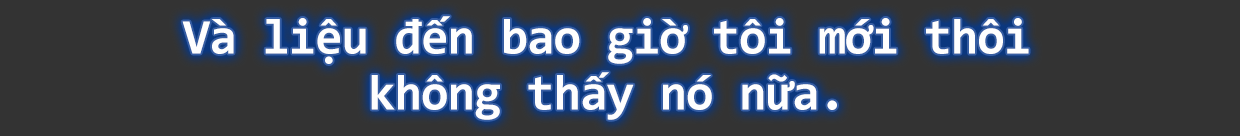
<style>
.page{position:relative;width:1240px;height:136px;background:#333333}
.page>*{position:absolute;margin:0}
.t1{font:50px/48px "Consolas-Bold";letter-spacing:-0.02em;color:#fefefe}
</style>
<div class="page">
<p class="t1" style="left:182px;top:16px;width:847px;height:104px;text-align:center">Và liệu đến bao giờ tôi mới thôi <br>không thấy nó nữa.</p>
</div>
